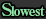
<style>
.page{position:relative;width:46px;height:19px;background:#333333}
.page>*{position:absolute;margin:0}
.t1{font:13px "RyuminPro-ExBold";letter-spacing:-0.08em;color:#90e2a5}
.t2{font:17px "RyuminPro-ExBold";letter-spacing:-0.08em;color:#90e2a5}
</style>
<div class="page">
<p class="t1" style="left:2px;top:3px;width:43px;height:14px"><span class="t2">S</span>lowest</p>
</div>
